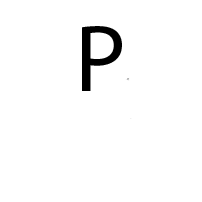
<style>
.page{position:relative;width:202px;height:202px;background:#ffffff}
.page>*{position:absolute;margin:0}
.t1{font:96px "MyriadHebrew-Regular";color:#000000}
</style>
<div class="page">
<p class="t1" style="left:82px;top:26px;width:40px;height:65px">P</p>
</div>
